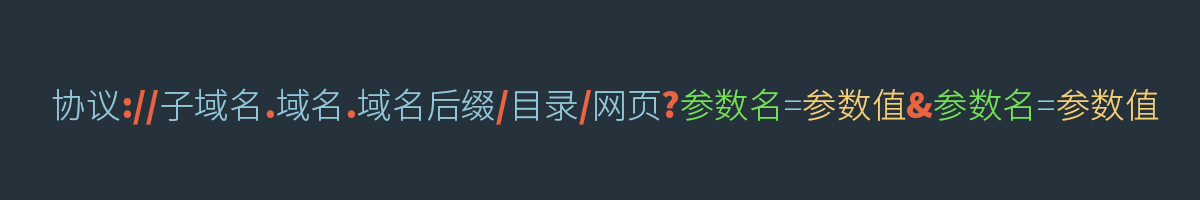
<style>
.page{position:relative;width:1200px;height:200px;background:#26323b}
.page>*{position:absolute;margin:0}
.t1{font:34.7px "SourceHanSansCN-Light";color:#92c7da}
.t2{font:34.7px "SourceHanSansCN-Heavy";color:#ea6442}
.t3{font:34.7px "SourceHanSansCN-Light";color:#74e158}
.t4{font:34.7px "SourceHanSansCN-Light";color:#f4cf77}
</style>
<div class="page">
<p class="t1" style="left:52px;top:88px;width:1107px;height:37px">协议<span class="t2">://</span>子域名<span class="t2">.</span>域名<span class="t2">.</span>域名后缀<span class="t2">/</span>目录<span class="t2">/</span>网页<span class="t2">?</span><span class="t3">参数名</span>=<span class="t4">参数值</span><span class="t2">&amp;</span><span class="t3">参数名</span>=<span class="t4">参数值</span></p>
</div>
